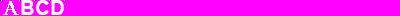
<style>
.page{position:relative;width:400px;height:16px;background:#ff00ff}
.page>*{position:absolute;margin:0}
.t1{font:20.3px "Arial-BoldMT";color:#ffffff}
</style>
<div class="page">
<p class="t1" style="left:21px;top:0px;width:13px;height:15px">B</p>
<p class="t1" style="left:36px;top:0px;width:13px;height:15px">C</p>
<p class="t1" style="left:51px;top:0px;width:13px;height:15px">D</p>
</div>
